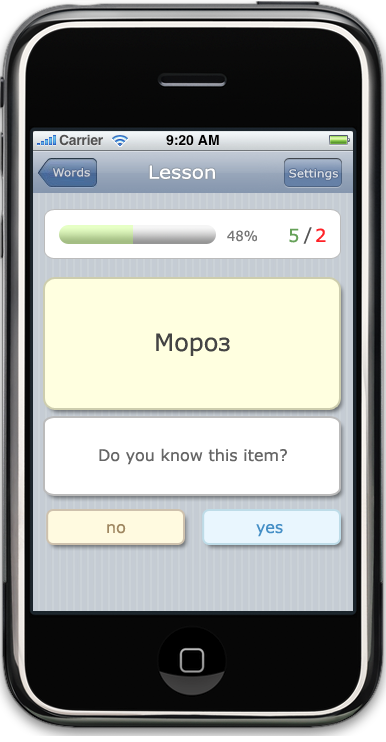
<style>
.page{position:relative;width:386px;height:742px}
.page>*{position:absolute;margin:0}
.t1{font:11px "Verdana";color:#d1d5db;scale:1.1 1}
.t2{font:18px "Verdana";color:#ffffff;scale:1.11 1}
.t3{font:11px "Verdana";color:#dbdfe5;scale:1.1 1}
.t4{font:14px "Verdana";color:#777777;scale:0.94 1}
.t5{font:18px "Verdana";color:#66a159}
.t6{font:18px "Verdana";color:#555555}
.t7{font:18px "Verdana";color:#ff2126}
.t8{font:24px "Verdana";color:#444444}
.t9{font:16px "Verdana";color:#666666}
.t10{font:16px "Verdana";color:#9f8761}
.t11{font:16px "Verdana";color:#458fc6}
</style>
<div class="page">
<p class="t1" style="left:53px;top:168px;width:37px;height:9px">Words</p>
<p class="t2" style="left:149px;top:165px;width:66px;height:14px">Lesson</p>
<p class="t3" style="left:289px;top:169px;width:49px;height:11px">Settings</p>
<p class="t4" style="left:227px;top:230px;width:30px;height:12px">48%</p>
<p class="t5" style="left:289px;top:228px;width:10px;height:15px">5</p>
<p class="t6" style="left:303px;top:227px;width:9px;height:17px">/</p>
<p class="t7" style="left:316px;top:228px;width:10px;height:14px">2</p>
<p class="t8" style="left:156px;top:333px;width:74px;height:23px">Мороз</p>
<p class="t9" style="left:99px;top:448px;width:188px;height:17px">Do you know this item?</p>
<p class="t10" style="left:107px;top:524px;width:19px;height:10px">no</p>
<p class="t11" style="left:256px;top:524px;width:27px;height:13px">yes</p>
</div>
